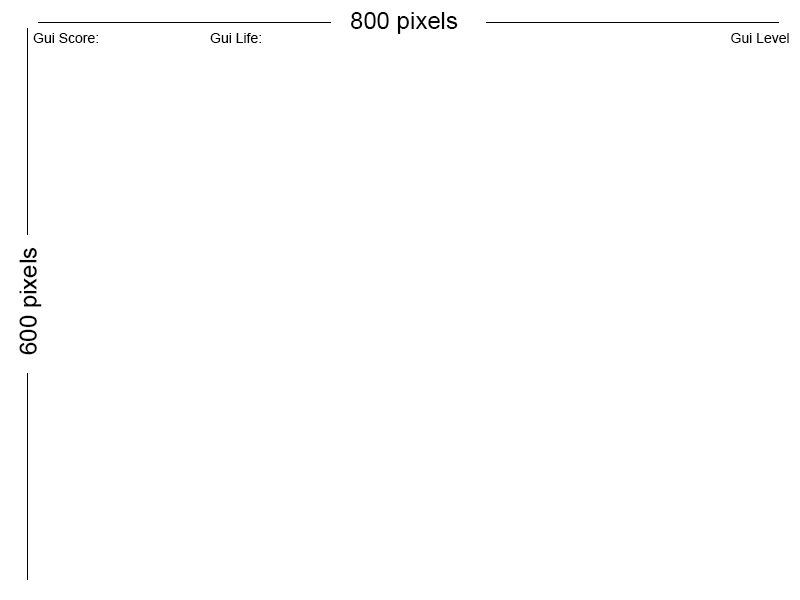
<style>
.page{position:relative;width:800px;height:600px;background:#ffffff}
.page>*{position:absolute;margin:0}
.t1{font:24px "ArialMT";color:#000000}
.t2{font:14px "ArialMT";color:#000000}
.t3{font:23.8px "ArialMT";color:#000000}
</style>
<div class="page">
<p class="t1" style="left:351px;top:12px;width:107px;height:22px">800 pixels</p>
<p class="t2" style="left:33px;top:33px;width:65px;height:10px">Gui Score:</p>
<p class="t2" style="left:210px;top:33px;width:51px;height:10px">Gui Life:</p>
<p class="t2" style="left:731px;top:33px;width:58px;height:10px">Gui Level</p>
<p class="t3" style="left:19px;top:247px;width:23px;height:108px;rotate:-90deg">600 pixels</p>
</div>
